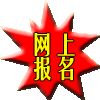
<style>
.page{position:relative;width:100px;height:100px;background:#ffffff}
.page>*{position:absolute;margin:0}
.t1{font:24px/12px "FZYTK--GBK1-0";letter-spacing:-0.025em;color:#fff600;font-weight:bold}
</style>
<div class="page">
<p class="t1" style="left:33px;top:33px;width:42px;height:48px">网上<br><br>报名</p>
</div>
